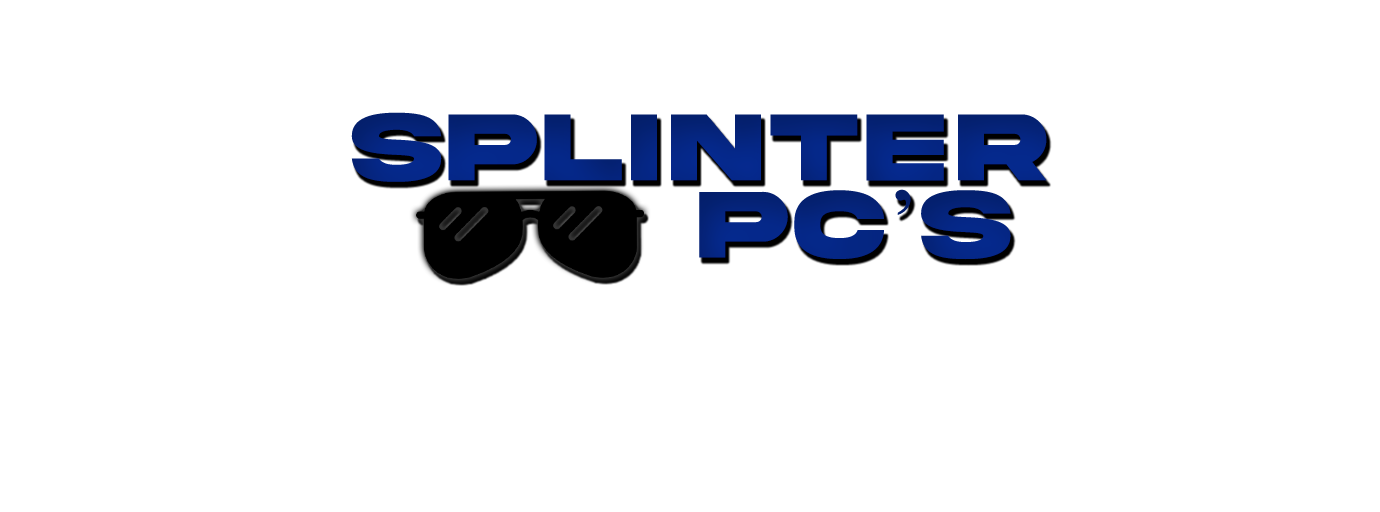
<style>
.page{position:relative;width:1380px;height:512px;background:#ffffff}
.page>*{position:absolute;margin:0}
.t1{font:100.3px "AkiraExpanded-SuperBold";letter-spacing:0.01em;color:#052681}
.t2{font:100px "AkiraExpanded-SuperBold";letter-spacing:0.01em;color:#052580}
.t3{font:100px "TimesNewRomanPSMT";letter-spacing:0.01em;color:#052580}
</style>
<div class="page">
<p class="t1" style="left:351px;top:112px;width:696px;height:70px">SPLINTER</p>
<p class="t2" style="left:699px;top:189px;width:312px;height:71px">PC<span class="t3">’</span>S</p>
</div>
